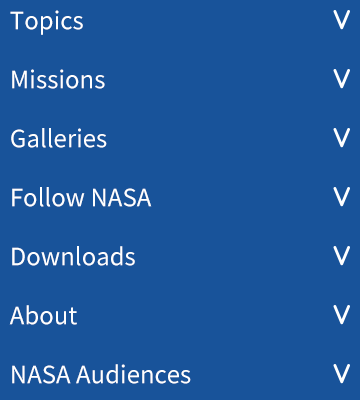
<style>
.page{position:relative;width:360px;height:400px;background:#18539a}
.page>*{position:absolute;margin:0}
.t1{font:24px "NotoSansKR-Regular";color:#ffffff}
</style>
<div class="page">
<p class="t1" style="left:10px;top:10px;width:73px;height:25px">Topics</p>
<p class="t1" style="left:12px;top:69px;width:93px;height:20px">Missions</p>
<p class="t1" style="left:11px;top:128px;width:96px;height:20px">Galleries</p>
<p class="t1" style="left:12px;top:187px;width:140px;height:20px">Follow NASA</p>
<p class="t1" style="left:12px;top:246px;width:123px;height:20px">Downloads</p>
<p class="t1" style="left:9px;top:305px;width:68px;height:20px">About</p>
<p class="t1" style="left:12px;top:364px;width:179px;height:20px">NASA Audiences</p>
</div>
